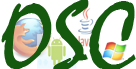
<style>
.page{position:relative;width:136px;height:69px;background:#ffffff}
.page>*{position:absolute;margin:0}
.t1{font:100px "Mistral";color:#14590d}
</style>
<div class="page">
<p class="t1" style="left:1px;top:0px;width:135px;height:69px">OSC</p>
</div>
